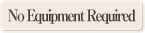
<style>
.page{position:relative;width:145px;height:33px;background:#f4e9e1}
.page>*{position:absolute;margin:0}
.t1{font:16px "RyuminPro-ExBold";letter-spacing:-0.12em;color:#403c38;scale:0.9 1}
</style>
<div class="page">
<p class="t1" style="left:8px;top:9px;width:128px;height:15px">No Equipment Required</p>
</div>
